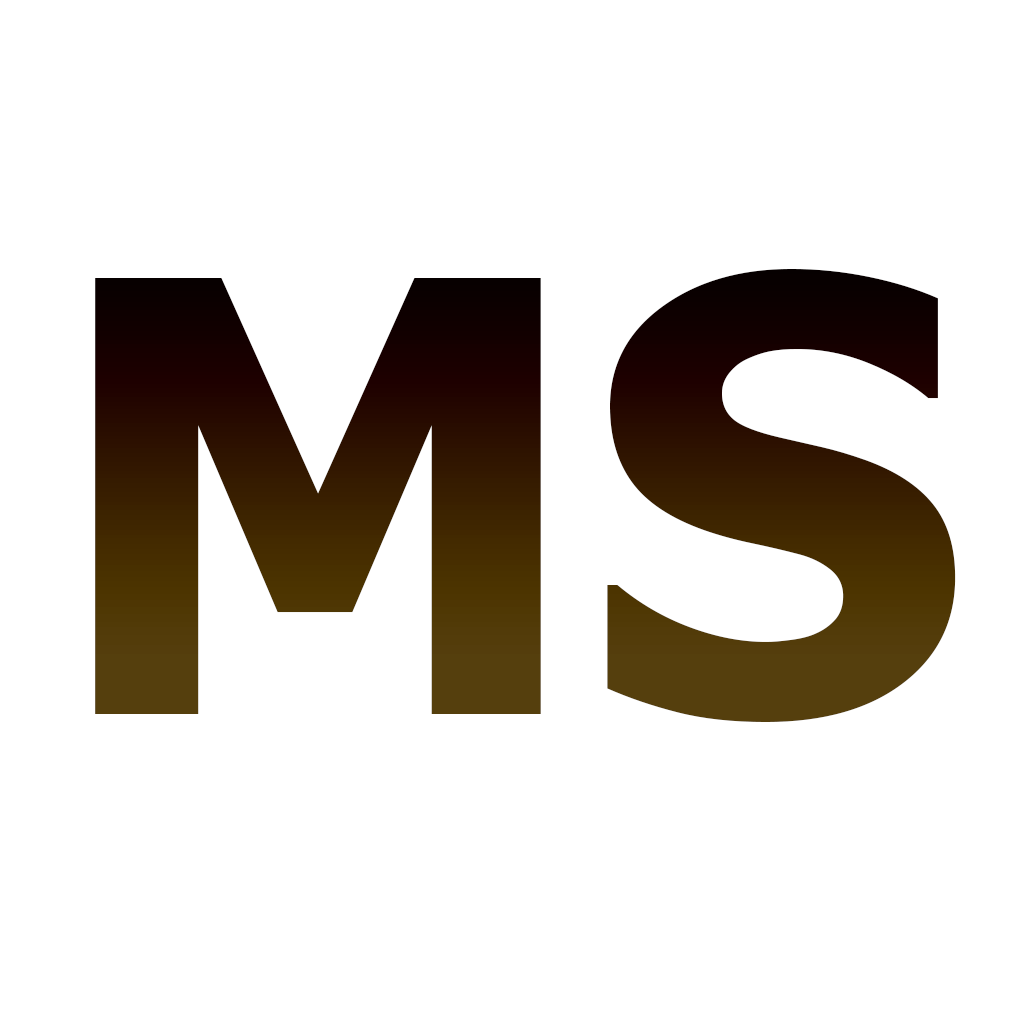
<style>
.page{position:relative;width:1024px;height:1024px;background:#ffffff}
.page>*{position:absolute;margin:0}
.t1{font:600px "Tahoma-Bold"}
</style>
<div class="page">
<p class="t1" style="left:95px;top:269px;width:861px;height:453px">MS</p>
</div>
